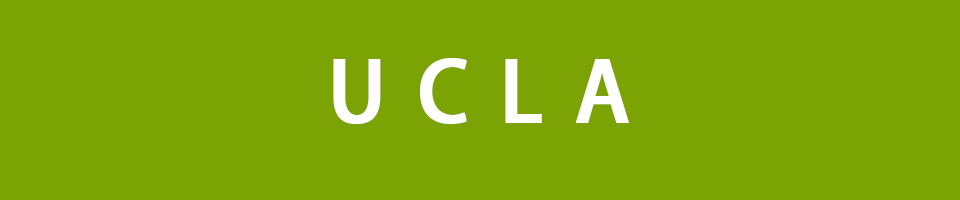
<style>
.page{position:relative;width:960px;height:200px;background:#7ba304}
.page>*{position:absolute;margin:0}
.t1{font:140.6px "AdobeHeitiStd-Regular";letter-spacing:0.36em;color:#ffffff;font-weight:bold}
</style>
<div class="page">
<p class="t1" style="left:333px;top:58px;width:296px;height:66px">UCLA</p>
</div>
